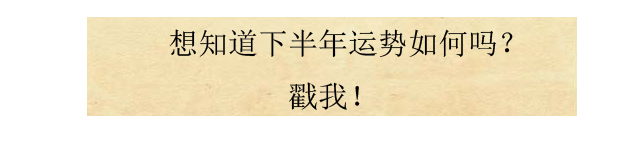
<style>
.page{position:relative;width:640px;height:145px;background:#ffffff}
.page>*{position:absolute;margin:0}
.t1{font:30px "SimSun";color:#000000}
</style>
<div class="page">
<p class="t1" style="left:169px;top:29px;width:344px;height:81px">想知道下半年运势如何吗？<br>        戳我！</p>
</div>
